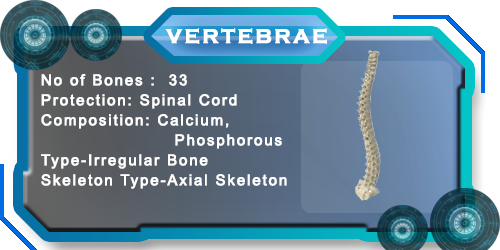
<style>
.page{position:relative;width:500px;height:250px}
.page>*{position:absolute;margin:0}
.t1{font:20.3px "CopperplateGothic-Bold";letter-spacing:0.1em;color:#ffffff;font-weight:bold}
.t2{font:15px/20px "ArialMT";letter-spacing:0.1em;color:#ffffff;font-weight:bold}
</style>
<div class="page">
<p class="t1" style="left:165px;top:28px;width:162px;height:16px">VERTEBRAE</p>
<p class="t2" style="left:41px;top:74px;width:246px;height:115px">No of Bones :  33 <br>Protection: Spinal Cord<br>Composition: Calcium,<br>                      Phosphorous<br>Type-Irregular Bone<br>Skeleton Type-Axial Skeleton</p>
</div>
